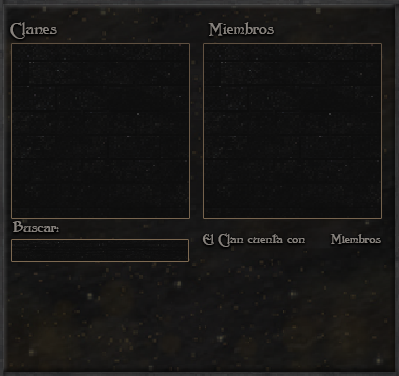
<style>
.page{position:relative;width:399px;height:376px}
.page>*{position:absolute;margin:0}
.t1{font:16px "Folkard";color:#88837e}
.t2{font:13.9px "Folkard";color:#88837e}
.t3{font:12.2px "Folkard";color:#88837e}
</style>
<div class="page">
<p class="t1" style="left:10px;top:22px;width:47px;height:17px">Clanes</p>
<p class="t1" style="left:208px;top:22px;width:66px;height:14px">Miembros</p>
<p class="t2" style="left:12px;top:221px;width:47px;height:11px">Buscar:</p>
<p class="t3" style="left:202px;top:233px;width:103px;height:14px">El Clan cuenta con</p>
<p class="t3" style="left:330px;top:234px;width:51px;height:10px">Miembros</p>
</div>
